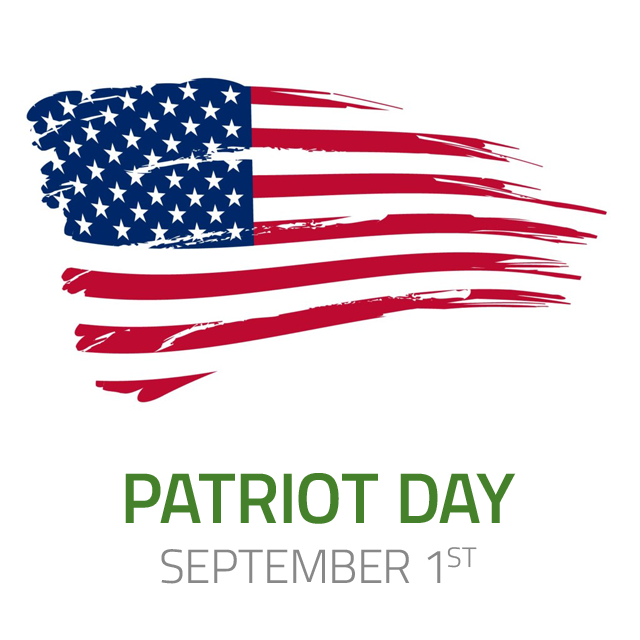
<style>
.page{position:relative;width:640px;height:640px;background:#ffffff}
.page>*{position:absolute;margin:0}
.t1{font:48px/60px "TitilliumWeb-Light";color:#888888;text-transform:uppercase}
.t2{font:72px/36px "TitilliumWeb-SemiBold";color:#45812b;text-transform:uppercase}
</style>
<div class="page">
<p class="t1" style="left:125px;top:473px;width:391px;height:111px;text-align:center"><span class="t2">Patriot Day<br></span>September 1st</p>
</div>
